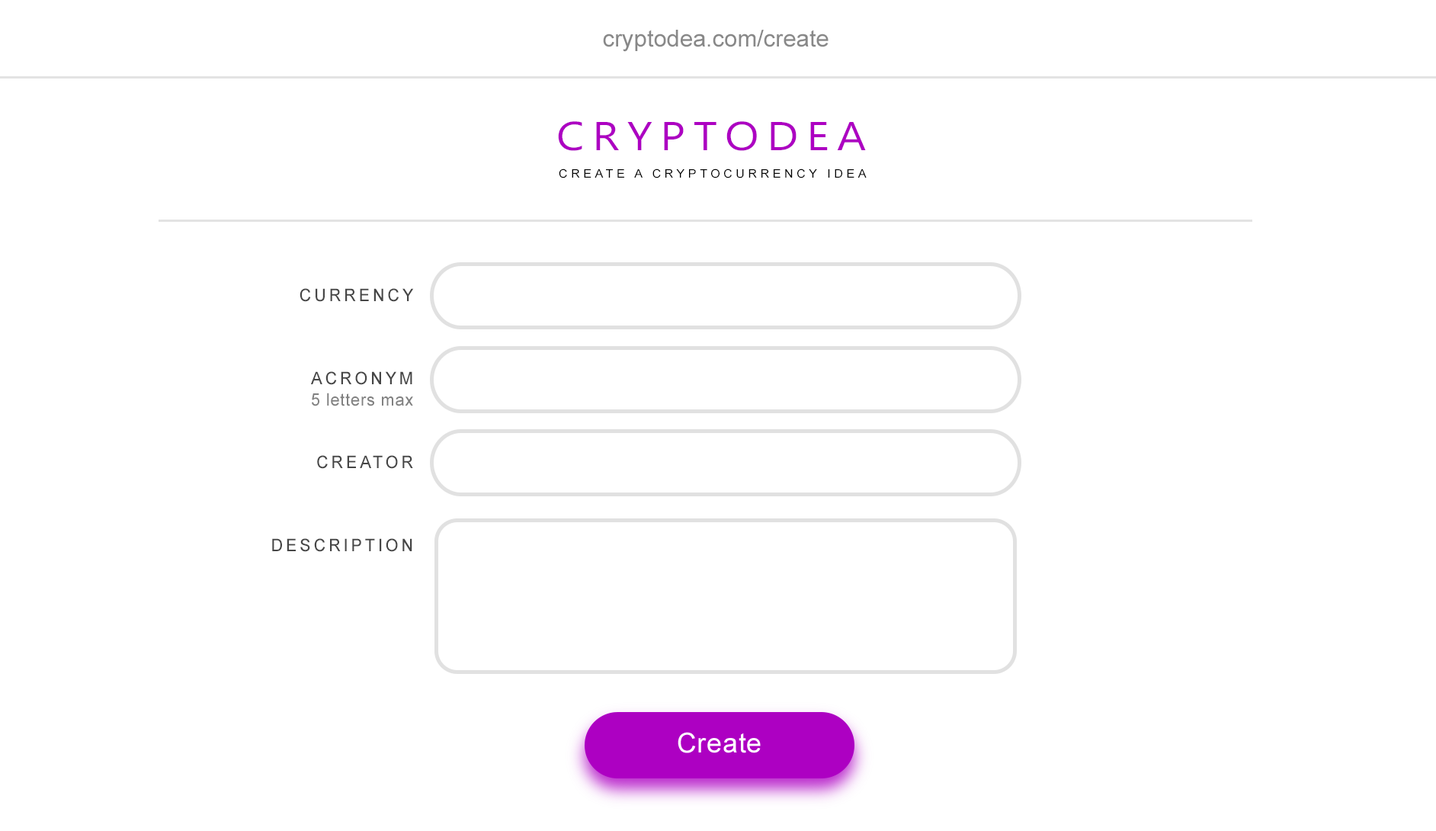
<style>
.page{position:relative;width:1436px;height:831px;background:#ffffff}
.page>*{position:absolute;margin:0}
.t1{font:23.2px "ArialMT";color:#888888}
.t2{font:40.4px "Ebrima";letter-spacing:0.18em;color:#ad00c2;scale:1.11 1}
.t3{font:11.6px "ArialMT";letter-spacing:0.28em;color:#000000;scale:1.06 1}
.t4{font:17.4px "ArialMT";letter-spacing:0.18em;color:#464646;scale:0.95 1}
.t5{font:17.4px "ArialMT";letter-spacing:0.04em;color:#818181;scale:0.95 1}
</style>
<div class="page">
<p class="t1" style="left:603px;top:30px;width:225px;height:22px">cryptodea.com/create</p>
<p class="t2" style="left:558px;top:121px;width:308px;height:30px">CRYPTODEA</p>
<p class="t3" style="left:559px;top:168px;width:307px;height:10px">CREATE A CRYPTOCURRENCY IDEA</p>
<p class="t4" style="left:272px;top:288px;width:142px;height:264px;text-align:right">CURRENCY<br><br><br><br>ACRONYM<br><span class="t5">5 letters max<br></span><br><br>CREATOR<br><br><br><br>DESCRIPTION</p>
</div>
